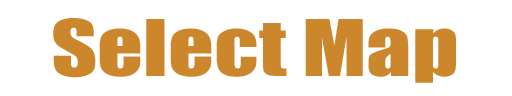
<style>
.page{position:relative;width:512px;height:96px;background:#ffffff}
.page>*{position:absolute;margin:0}
.t1{font:72px "Impact";color:#cc862b;scale:1.25 1}
</style>
<div class="page">
<p class="t1" style="left:53px;top:18px;width:403px;height:65px">Select Map</p>
</div>
